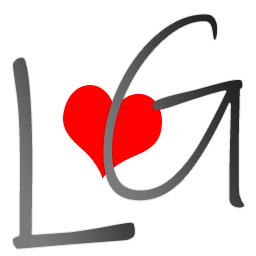
<style>
.page{position:relative;width:256px;height:256px;background:#ffffff}
.page>*{position:absolute;margin:0}
.t1{font:220px "InkFree";letter-spacing:-0.01em;color:#ffffff}
.t2{font:300px "InkFree";letter-spacing:-0.01em;color:#ffffff}
</style>
<div class="page">
<p class="t1" style="left:102px;top:13px;width:143px;height:196px">G</p>
<p class="t2" style="left:12px;top:56px;width:124px;height:194px">L</p>
</div>
